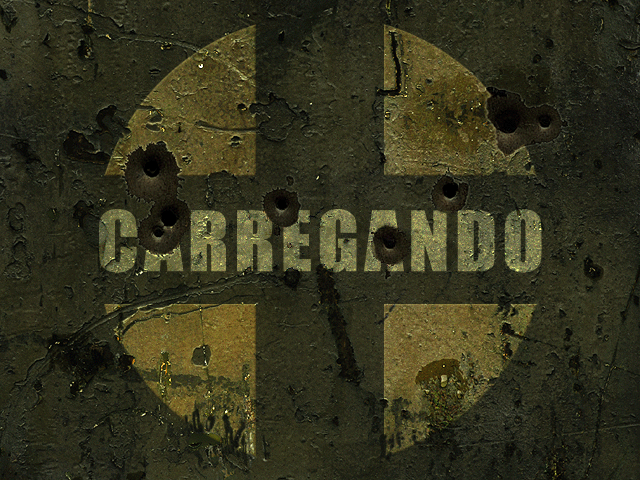
<style>
.page{position:relative;width:640px;height:480px}
.page>*{position:absolute;margin:0}
.t1{font:77.3px "Impact";letter-spacing:0.06em;text-transform:uppercase}
</style>
<div class="page">
<p class="t1" style="left:99px;top:209px;width:443px;height:64px">carregando</p>
</div>
